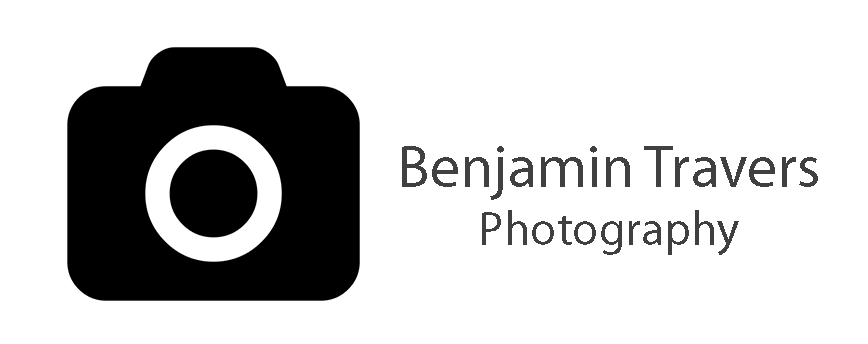
<style>
.page{position:relative;width:868px;height:344px;background:#ffffff}
.page>*{position:absolute;margin:0}
.t1{font:60px "MyriadPro-Regular";color:#404040}
.t2{font:48px "MyriadPro-Regular";color:#404040}
</style>
<div class="page">
<p class="t1" style="left:402px;top:146px;width:416px;height:109px;text-align:center">Benjamin Travers<br><span class="t2">Photography</span></p>
</div>
